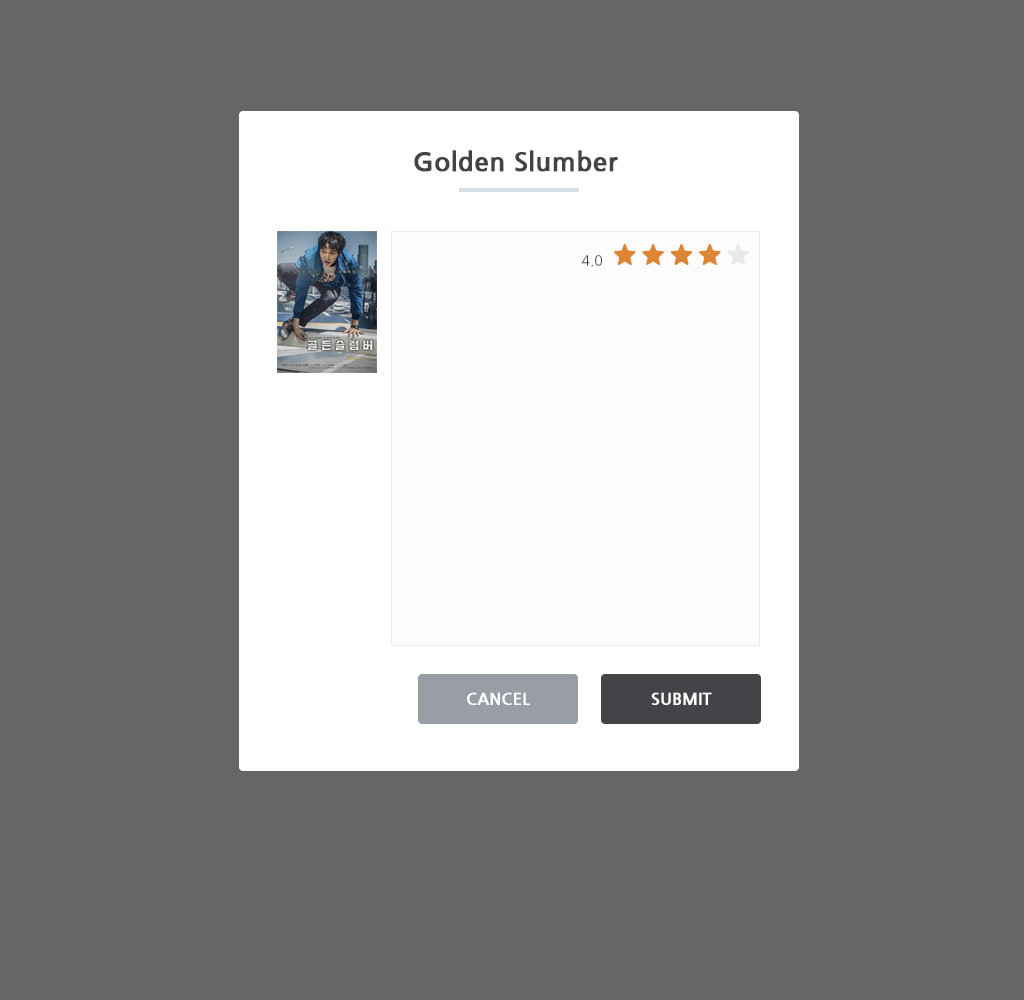
<style>
.page{position:relative;width:1024px;height:1000px;background:#666666}
.page>*{position:absolute;margin:0}
.t1{font:26px "NanumGothicBold";color:#424448;font-weight:bold}
.t2{font:14px "NanumGothic";color:#33394b}
.t3{font:16px "NanumGothicBold";color:#ffffff;text-transform:uppercase;font-weight:bold}
</style>
<div class="page">
<p class="t1" style="left:414px;top:150px;width:204px;height:22px">Golden Slumber</p>
<p class="t2" style="left:582px;top:255px;width:20px;height:12px">4.0</p>
<p class="t3" style="left:467px;top:692px;width:63px;height:13px">cancel</p>
<p class="t3" style="left:651px;top:692px;width:61px;height:13px">Submit</p>
</div>
